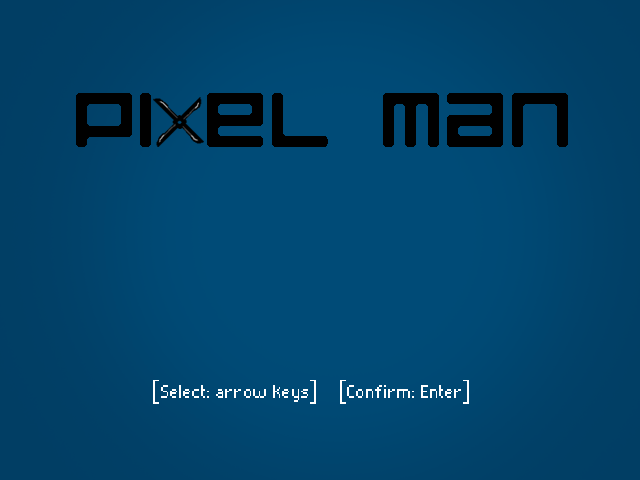
<style>
.page{position:relative;width:640px;height:480px}
.page>*{position:absolute;margin:0}
.t1{font:100px "LuggageRoundRegular";color:#000000}
.t2{font:24px "Pixelade";color:#ffffff}
</style>
<div class="page">
<p class="t1" style="left:76px;top:93px;width:492px;height:54px">Pi el Man</p>
<p class="t2" style="left:153px;top:380px;width:316px;height:24px">[Select: arrow keys]    [Confirm: Enter]</p>
</div>
